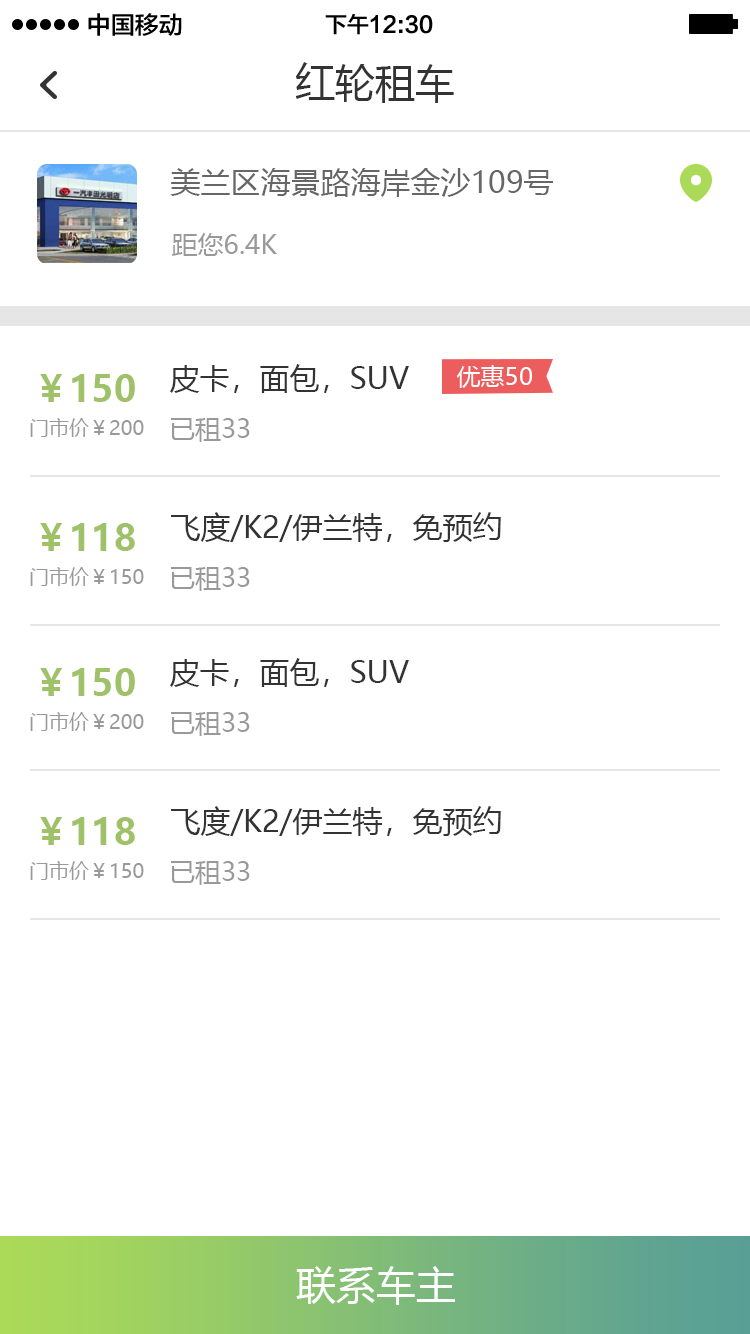
<style>
.page{position:relative;width:750px;height:1334px;background:#ffffff}
.page>*{position:absolute;margin:0}
.t1{font:24px "FZLTZHK--GBK1-0";color:#000000}
.t2{font:22px "FZLTZHK--GBK1-0";color:#000000}
.t3{font:40px "MicrosoftYaHei";color:#333333}
.t4{font:30px "MicrosoftYaHei";color:#666666}
.t5{font:26px "MicrosoftYaHei";color:#999999}
.t6{font:30px "MicrosoftYaHei";color:#333333}
.t7{font:24px "MicrosoftYaHei";color:#ffffff}
.t8{font:36px "MicrosoftYaHei-Bold";color:#9fc167}
.t9{font:20px "MicrosoftYaHei";color:#999999}
.t10{font:40px "MicrosoftYaHei";color:#ffffff}
</style>
<div class="page">
<p class="t1" style="left:88px;top:13px;width:94px;height:23px">中国移动</p>
<p class="t2" style="left:325px;top:14px;width:108px;height:21px">下午12:30</p>
<p class="t3" style="left:295px;top:62px;width:159px;height:41px">红轮租车</p>
<p class="t4" style="left:170px;top:168px;width:383px;height:29px">美兰区海景路海岸金沙109号</p>
<p class="t5" style="left:171px;top:233px;width:106px;height:23px">距您6.4K</p>
<p class="t6" style="left:170px;top:364px;width:239px;height:29px">皮卡，面包，SUV</p>
<p class="t7" style="left:457px;top:365px;width:75px;height:23px">优惠50</p>
<p class="t8" style="left:40px;top:374px;width:95px;height:28px">￥150</p>
<p class="t9" style="left:30px;top:418px;width:114px;height:19px">门市价￥200</p>
<p class="t5" style="left:171px;top:418px;width:79px;height:24px">已租33</p>
<p class="t6" style="left:171px;top:512px;width:330px;height:30px">飞度/K2/伊兰特，免预约</p>
<p class="t8" style="left:40px;top:523px;width:95px;height:28px">￥118</p>
<p class="t9" style="left:30px;top:567px;width:114px;height:19px">门市价￥150</p>
<p class="t5" style="left:171px;top:567px;width:79px;height:24px">已租33</p>
<p class="t6" style="left:170px;top:658px;width:239px;height:29px">皮卡，面包，SUV</p>
<p class="t8" style="left:40px;top:668px;width:95px;height:28px">￥150</p>
<p class="t9" style="left:30px;top:712px;width:114px;height:19px">门市价￥200</p>
<p class="t5" style="left:171px;top:712px;width:79px;height:24px">已租33</p>
<p class="t6" style="left:171px;top:806px;width:330px;height:30px">飞度/K2/伊兰特，免预约</p>
<p class="t8" style="left:40px;top:817px;width:95px;height:28px">￥118</p>
<p class="t9" style="left:30px;top:861px;width:114px;height:19px">门市价￥150</p>
<p class="t5" style="left:171px;top:861px;width:79px;height:24px">已租33</p>
<p class="t10" style="left:296px;top:1266px;width:159px;height:39px">联系车主</p>
</div>
